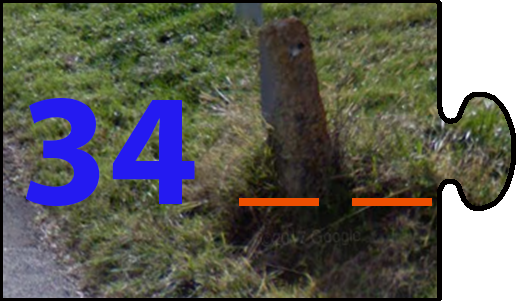
<style>
.page{position:relative;width:520px;height:301px}
.page>*{position:absolute;margin:0}
.t1{font:160px "MyriadPro-Bold";color:#241af1}
.t2{font:160px "MyriadPro-Bold";color:#ed4f01}
</style>
<div class="page">
<p class="t1" style="left:25px;top:98px;width:170px;height:109px">34</p>
<p class="t2" style="left:239px;top:198px;width:193px;height:8px">_ _</p>
</div>
